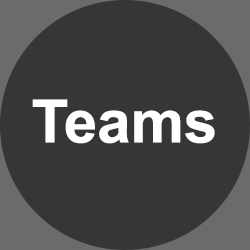
<style>
.page{position:relative;width:250px;height:250px;background:#363636}
.page>*{position:absolute;margin:0}
.t1{font:60px "Arial-BoldMT";color:#ffffff}
</style>
<div class="page">
<p class="t1" style="left:32px;top:99px;width:183px;height:45px">Teams</p>
</div>
